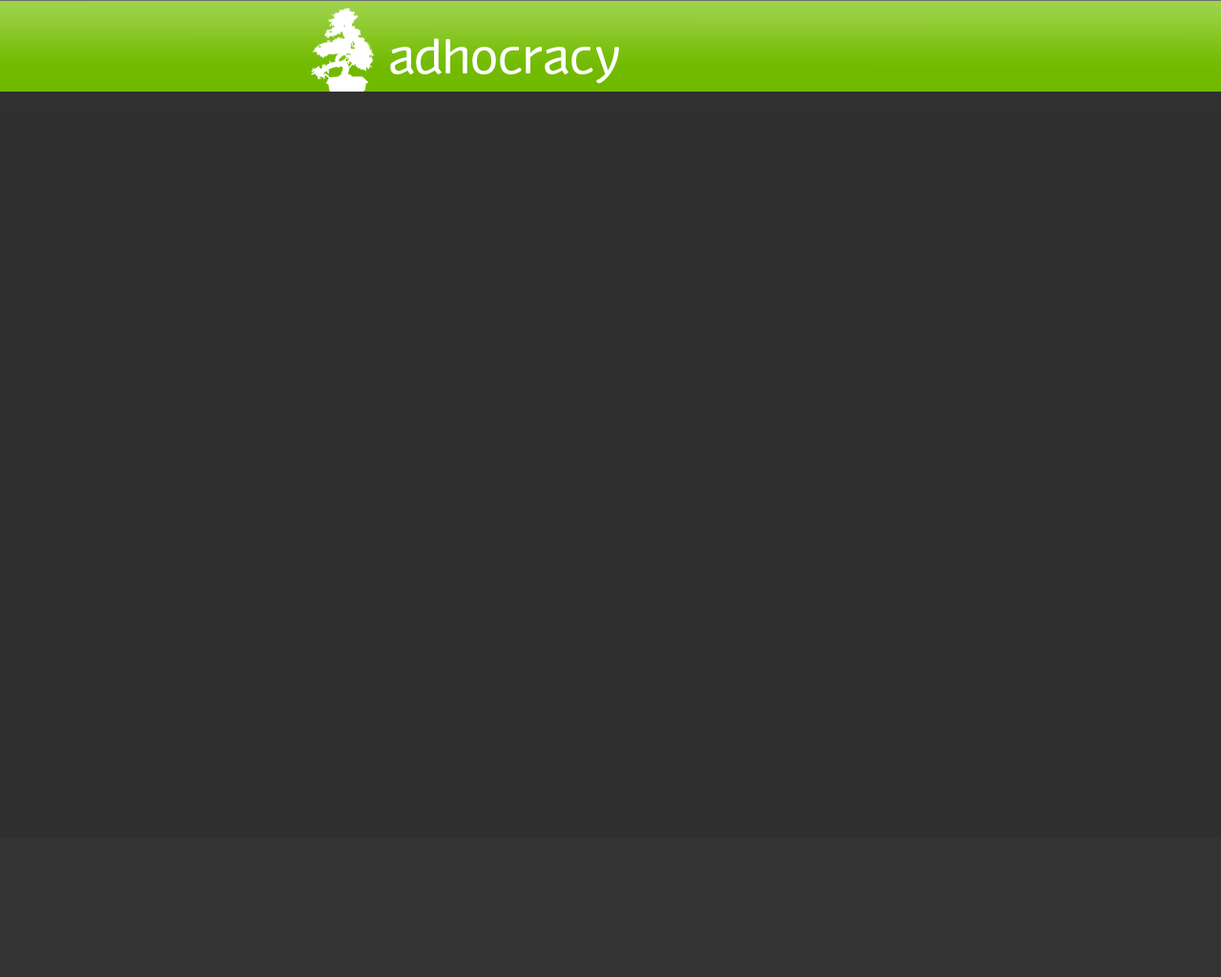
<style>
.page{position:relative;width:1221px;height:977px;background:#2f2f2f}
.page>*{position:absolute;margin:0}
.t1{font:45.8px "Myndraine";color:#ffffff}
</style>
<div class="page">
<p class="t1" style="left:390px;top:38px;width:229px;height:46px">adhocracy</p>
</div>
